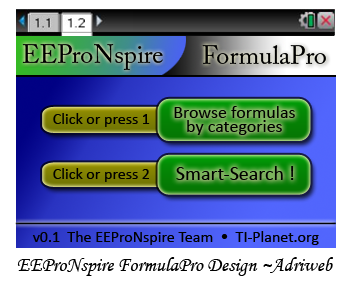
<style>
.page{position:relative;width:352px;height:281px;background:#ffffff}
.page>*{position:absolute;margin:0}
.t1{font:26px "ACaslonPro-Regular";color:#000000}
.t2{font:16px "Calibri";color:#000000}
.t3{font:18px/3.6px "Calibri";color:#000000}
.t4{font:12px/3.6px "Calibri";color:#000000}
.t5{font:20px "Calibri";color:#000000}
.t6{font:20px "MonotypeCorsiva";color:#000000}
</style>
<div class="page">
<p class="t1" style="left:22px;top:44px;width:141px;height:26px">EEProNspire</p>
<p class="t1" style="left:202px;top:45px;width:124px;height:19px">FormulaPro</p>
<p class="t2" style="left:53px;top:113px;width:97px;height:14px">Click or press 1</p>
<p class="t3" style="left:174px;top:106px;width:121px;height:29px;text-align:center">Browse formulas<br><span class="t4"> <br><br><br></span>by categories</p>
<p class="t2" style="left:53px;top:168px;width:96px;height:14px">Click or press 2</p>
<p class="t5" style="left:176px;top:166px;width:118px;height:14px">Smart-Search !</p>
<p class="t2" style="left:32px;top:231px;width:287px;height:14px">v0.1  The EEProNspire Team  •  TI-Planet.org</p>
<p class="t6" style="left:17px;top:257px;width:316px;height:19px">EEProNspire FormulaPro Design ~Adriweb</p>
</div>
